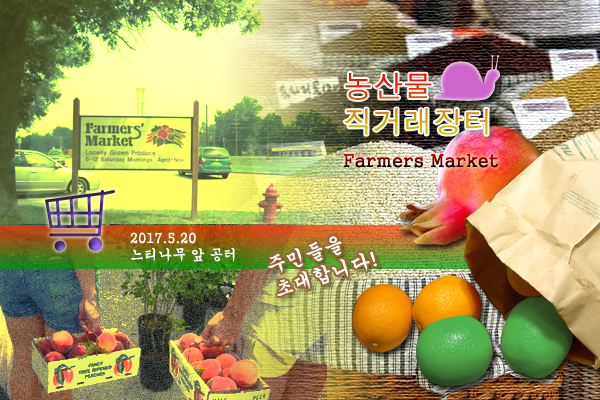
<style>
.page{position:relative;width:600px;height:400px}
.page>*{position:absolute;margin:0}
.t1{font:30px "Dotum"}
.t2{font:18px "Gungsuh"}
.t3{font:14px "Gungsuh";color:#ffffff}
.t4{font:20px "Gungsuh";color:#ffffff}
</style>
<div class="page">
<p class="t1" style="left:344px;top:72px;width:144px;height:63px">농산물 <br>직거래장터</p>
<p class="t2" style="left:343px;top:154px;width:155px;height:14px">Farmers Market</p>
<p class="t3" style="left:130px;top:232px;width:105px;height:30px">2017.5.20<br>느티나무 앞 공터</p>
<p class="t4" style="left:268px;top:236px;width:109px;height:60px;rotate:-17deg">주민들을<br>초대합니다!</p>
</div>
